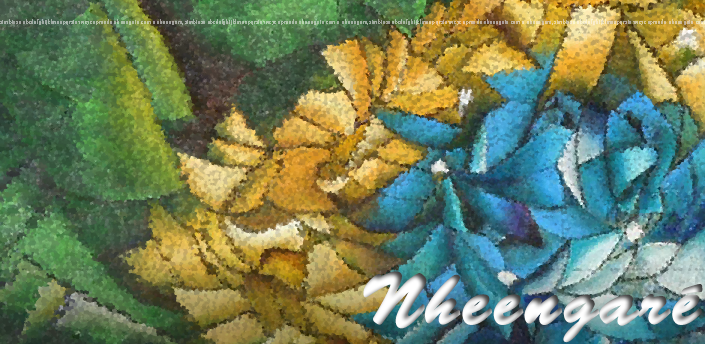
<style>
.page{position:relative;width:705px;height:344px}
.page>*{position:absolute;margin:0}
.t1{font:6px "AvenirNextCondensed-Regular";letter-spacing:0.05em;font-weight:bold}
.t2{font:6px "AvenirNextCondensed-Regular";letter-spacing:0.01em;font-weight:bold}
.t3{font:72px "BrushScriptStd";letter-spacing:0.05em;font-weight:bold}
</style>
<div class="page">
<p class="t1" style="left:0px;top:19px;width:705px;height:6px">simbiose abcdefghijklmnopqrstuvwxyz aprenda nheengatu com o nheengar<span class="t2">e, </span>simbiose abcdefghijklmnopqrstuvwxyz aprenda nheengatu com o nheengar<span class="t2">e, </span>simbiose abcdefghijklmnopqrstuvwxyz aprenda nheengatu com o nheengar<span class="t2">e, </span>simbiose abcdefghijklmnopqrstuvwxyz aprenda nheengatu com o nheengar<span class="t2">e, v</span></p>
<p class="t3" style="left:363px;top:271px;width:340px;height:72px">Nheengaré</p>
</div>
